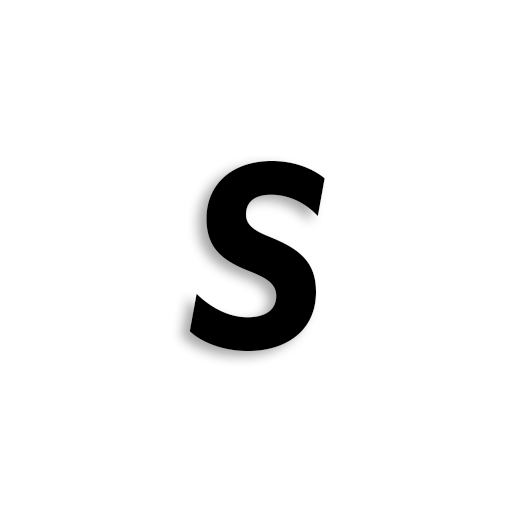
<style>
.page{position:relative;width:512px;height:512px;background:#ffffff}
.page>*{position:absolute;margin:0}
.t1{font:309px "Karbon-SemiboldItalic";color:#000000}
</style>
<div class="page">
<p class="t1" style="left:189px;top:161px;width:136px;height:191px">S</p>
</div>
